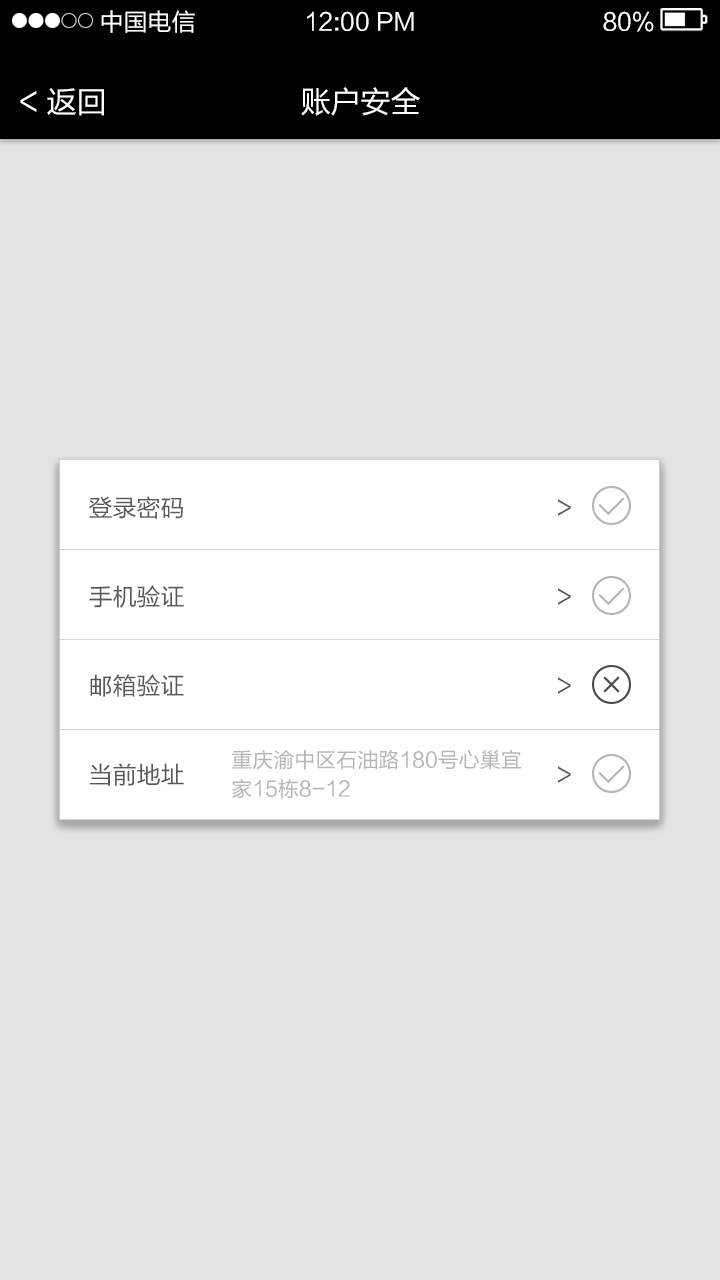
<style>
.page{position:relative;width:720px;height:1280px;background:#e2e4e4}
.page>*{position:absolute;margin:0}
.t1{font:24px "FZLTHK--GBK1-0";color:#ffffff}
.t2{font:30px "FZLTHK--GBK1-0";color:#ffffff}
.t3{font:24px/89px "FZLTHK--GBK1-0";color:#595757}
.t4{font:21px/29px "FZLTHK--GBK1-0";color:#b5b5b6}
</style>
<div class="page">
<p class="t1" style="left:101px;top:10px;width:94px;height:23px">中国电信</p>
<p class="t1" style="left:307px;top:11px;width:107px;height:20px">12:00 PM</p>
<p class="t1" style="left:603px;top:11px;width:51px;height:21px">80%</p>
<p class="t2" style="left:20px;top:88px;width:84px;height:28px">&lt; 返回</p>
<p class="t2" style="left:301px;top:87px;width:119px;height:29px">账户安全</p>
<p class="t3" style="left:89px;top:496px;width:482px;height:290px">登录密码           &gt;<br>手机验证           &gt;<br>邮箱验证           &gt;<br>当前地址           &gt;</p>
<p class="t4" style="left:232px;top:749px;width:289px;height:50px">重庆渝中区石油路180号心巢宜<br>家15栋8-12</p>
</div>
